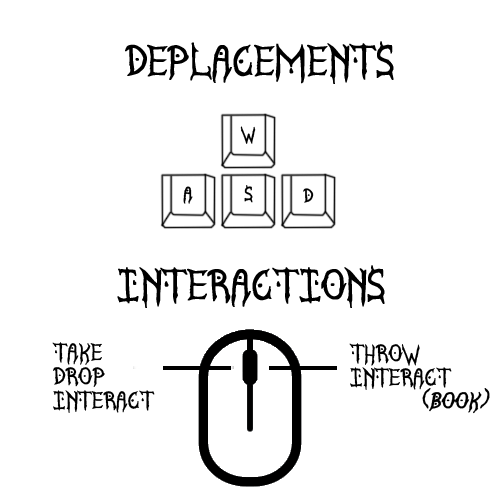
<style>
.page{position:relative;width:500px;height:500px;background:#ffffff}
.page>*{position:absolute;margin:0}
.t1{font:36px "SatanycDemoniacSt";color:#000000;font-weight:bold}
.t2{font:16px "SatanycDemoniacSt";color:#000000;font-weight:bold}
.t3{font:20px "SatanycDemoniacSt";color:#000000;font-weight:bold}
.t4{font:19px "SatanycDemoniacSt";color:#000000;font-weight:bold;font-style:italic}
</style>
<div class="page">
<p class="t1" style="left:125px;top:41px;width:269px;height:43px">deplacements</p>
<p class="t2" style="left:240px;top:126px;width:16px;height:18px">w</p>
<p class="t2" style="left:244px;top:185px;width:9px;height:18px">s</p>
<p class="t2" style="left:183px;top:186px;width:10px;height:18px">a</p>
<p class="t2" style="left:303px;top:188px;width:11px;height:15px">d</p>
<p class="t1" style="left:117px;top:265px;width:268px;height:43px">Interactions</p>
<p class="t3" style="left:52px;top:342px;width:103px;height:71px">TAke<br>Drop<br>Interact</p>
<p class="t3" style="left:349px;top:343px;width:103px;height:47px">Throw<br>Interact</p>
<p class="t4" style="left:422px;top:388px;width:68px;height:26px">(Book)</p>
</div>
